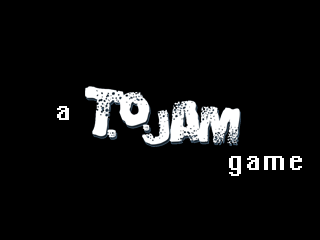
<style>
.page{position:relative;width:320px;height:240px;background:#000000}
.page>*{position:absolute;margin:0}
.t1{font:24px "System";letter-spacing:0.075em;color:#ffffff}
</style>
<div class="page">
<p class="t1" style="left:57px;top:106px;width:12px;height:14px">a</p>
<p class="t1" style="left:229px;top:156px;width:73px;height:20px">game</p>
</div>
